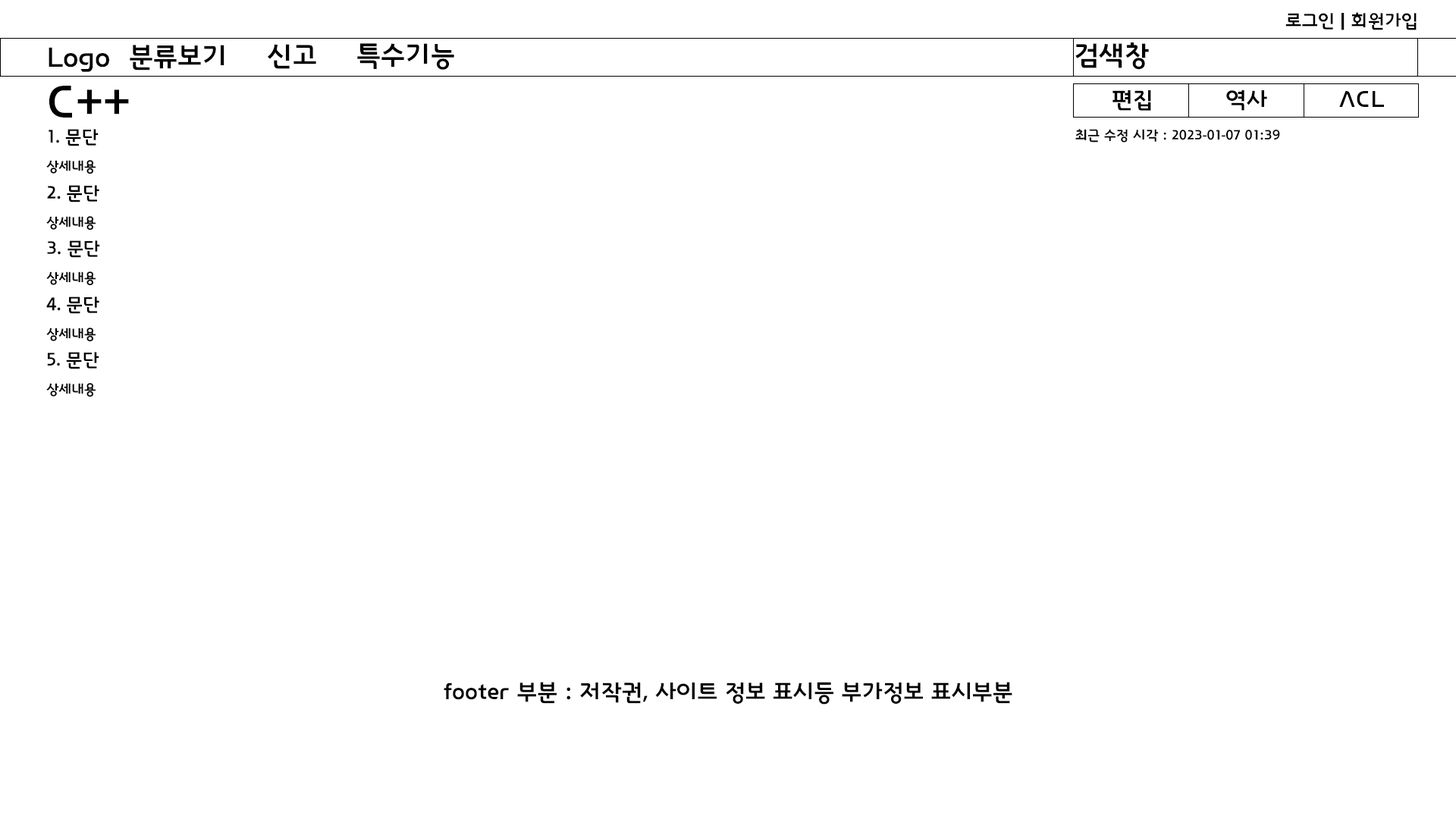
<style>
.page{position:relative;width:1456px;height:819px;background:#ffffff}
.page>*{position:absolute;margin:0}
.t1{font:18.2px "InterGTB";color:#000000}
.t2{font:27.3px "InterGTB";color:#000000}
.t3{font:45.5px "InterGTB";color:#000000}
.t4{font:22.7px "InterGTB";color:#000000}
.t5{font:13.6px "InterGTB";color:#000000}
</style>
<div class="page">
<p class="t1" style="left:1285px;top:12px;width:132px;height:18px">로그인 | 회원가입</p>
<p class="t2" style="left:49px;top:47px;width:60px;height:25px">Logo</p>
<p class="t2" style="left:130px;top:45px;width:94px;height:26px">분류보기</p>
<p class="t2" style="left:268px;top:44px;width:48px;height:25px">신고</p>
<p class="t2" style="left:357px;top:43px;width:97px;height:27px">특수기능</p>
<p class="t2" style="left:1075px;top:42px;width:74px;height:28px">검색창</p>
<p class="t3" style="left:49px;top:86px;width:80px;height:32px">C++</p>
<p class="t4" style="left:1112px;top:90px;width:39px;height:21px">편집</p>
<p class="t4" style="left:1226px;top:90px;width:41px;height:21px">역사</p>
<p class="t4" style="left:1339px;top:91px;width:45px;height:16px">ACL</p>
<p class="t1" style="left:46px;top:129px;width:54px;height:268px">1. 문단<br><span class="t5">상세내용<br></span>2. 문단<br><span class="t5">상세내용<br></span>3. 문단<br><span class="t5">상세내용<br></span>4. 문단<br><span class="t5">상세내용<br></span>5. 문단<br><span class="t5">상세내용</span></p>
<p class="t5" style="left:1075px;top:129px;width:205px;height:14px">최근 수정 시각 : 2023-01-07 01:39</p>
<p class="t4" style="left:444px;top:682px;width:568px;height:22px">footer 부분 : 저작권, 사이트 정보 표시등 부가정보 표시부분</p>
</div>
